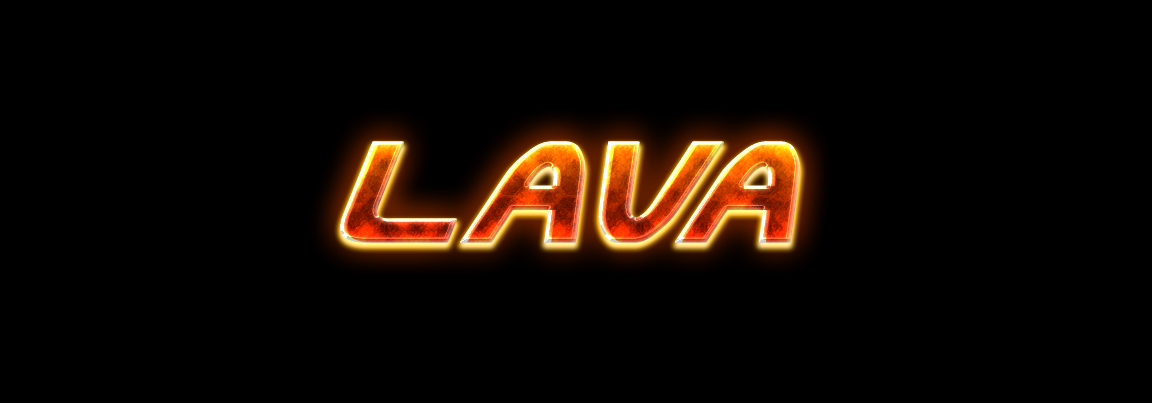
<style>
.page{position:relative;width:1152px;height:403px;background:#000000}
.page>*{position:absolute;margin:0}
.t1{font:172px "UsuziItalic";letter-spacing:-0.025em;font-weight:bold}
</style>
<div class="page">
<p class="t1" style="left:340px;top:141px;width:460px;height:102px">lava</p>
<p class="t1" style="left:340px;top:141px;width:460px;height:102px">lava</p>
<p class="t1" style="left:340px;top:141px;width:460px;height:102px">lava</p>
</div>
